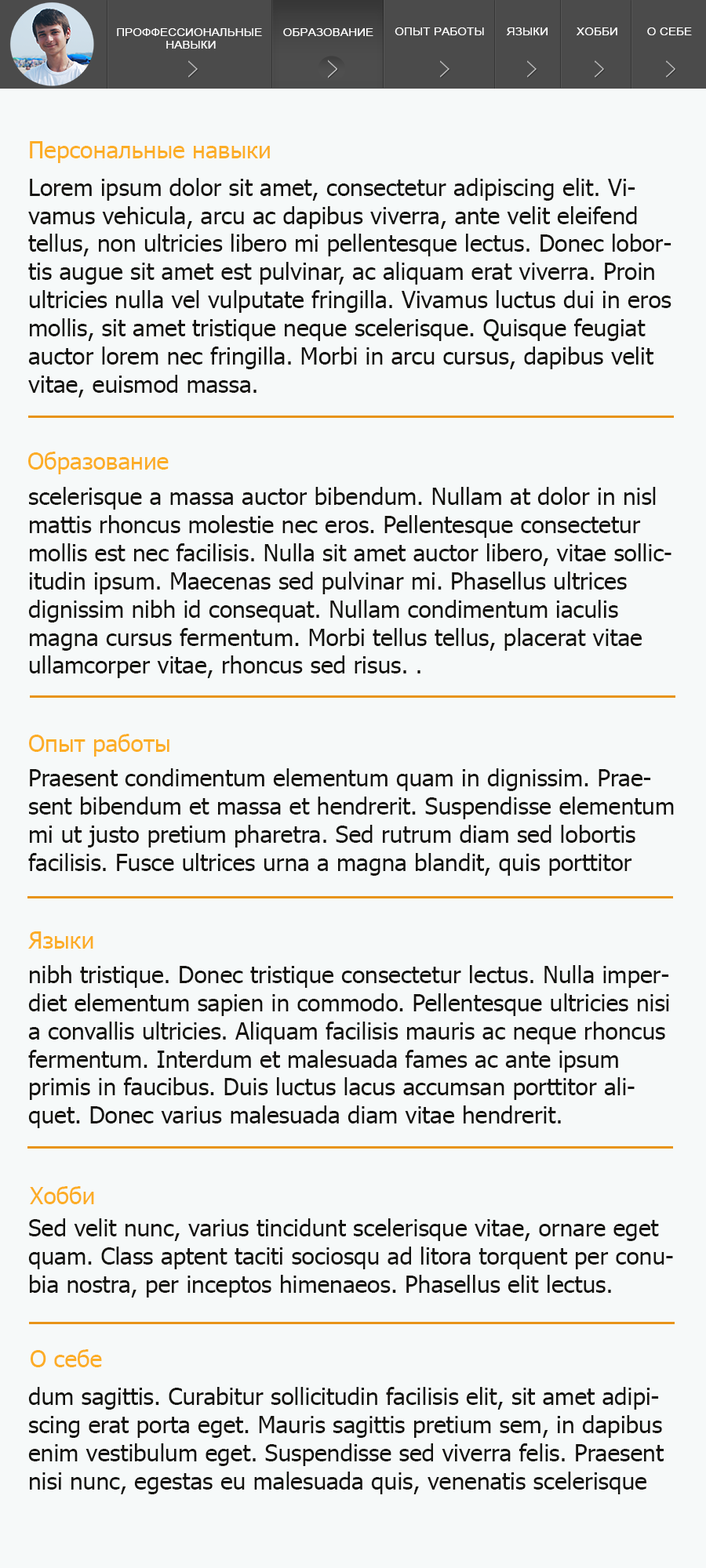
<style>
.page{position:relative;width:706px;height:1568px;background:#f6f9f9}
.page>*{position:absolute;margin:0}
.t1{font:10.6px "ArialMT";letter-spacing:0.032em;color:#ffffff;text-transform:uppercase;scale:1.07 1}
.t2{font:23.4px "Tahoma";color:#fcad26}
.t3{font:23.4px "Tahoma";color:#14130f}
</style>
<div class="page">
<p class="t1" style="left:117px;top:28px;width:145px;height:21px;text-align:center">Проффессиональные <br>навыки</p>
<p class="t1" style="left:283px;top:28px;width:90px;height:8px">образование</p>
<p class="t1" style="left:394px;top:27px;width:90px;height:8px">опыт работы</p>
<p class="t1" style="left:506px;top:27px;width:41px;height:8px">языки</p>
<p class="t1" style="left:576px;top:27px;width:41px;height:8px">хобби</p>
<p class="t1" style="left:647px;top:27px;width:44px;height:8px">о себе</p>
<p class="t2" style="left:30px;top:141px;width:240px;height:22px">Персональные навыки</p>
<p class="t3" style="left:28px;top:178px;width:645px;height:1316px">Lorem ipsum dolor sit amet, consectetur adipiscing elit. Vivamus vehicula, arcu ac dapibus viverra, ante velit eleifend tellus, non ultricies libero mi pellentesque lectus. Donec lobortis augue sit amet est pulvinar, ac aliquam erat viverra. Proin ultricies nulla vel vulputate fringilla. Vivamus luctus dui in eros <br>mollis, sit amet tristique neque scelerisque. Quisque feugiat auctor lorem nec fringilla. Morbi in arcu cursus, dapibus velit vitae, euismod massa. <br><br><br><br>scelerisque a massa auctor bibendum. Nullam at dolor in nisl mattis rhoncus molestie nec eros. Pellentesque consectetur mollis est nec facilisis. Nulla sit amet auctor libero, vitae sollicitudin ipsum. Maecenas sed pulvinar mi. Phasellus ultrices dignissim nibh id consequat. Nullam condimentum iaculis magna cursus fermentum. Morbi tellus tellus, placerat vitae ullamcorper vitae, rhoncus sed risus. .<br><br><br><br>Praesent condimentum elementum quam in dignissim. Praesent bibendum et massa et hendrerit. Suspendisse elementum mi ut justo pretium pharetra. Sed rutrum diam sed lobortis facilisis. Fusce ultrices urna a magna blandit, quis porttitor  <br><br><br><br>nibh tristique. Donec tristique consectetur lectus. Nulla imperdiet elementum sapien in commodo. Pellentesque ultricies nisi a convallis ultricies. Aliquam facilisis mauris ac neque rhoncus fermentum. Interdum et malesuada fames ac ante ipsum primis in faucibus. Duis luctus lacus accumsan porttitor aliquet. Donec varius malesuada diam vitae hendrerit.<br><br><br><br>Sed velit nunc, varius tincidunt scelerisque vitae, ornare eget quam. Class aptent taciti sociosqu ad litora torquent per conubia nostra, per inceptos himenaeos. Phasellus elit lectus. <br><br><br><br>dum sagittis. Curabitur sollicitudin facilisis elit, sit amet adipiscing erat porta eget. Mauris sagittis pretium sem, in dapibus enim vestibulum eget. Suspendisse sed viverra felis. Praesent nisi nunc, egestas eu malesuada quis, venenatis scelerisque tellus. Nam vel tellus eu tortor imperdiet hendrerit id id sapien. Sed quis turpis erat. Fusce aliquam, augue et mattis lacinia, tortor sem commodo felis, sit amet auctor sapien nisl non velit.</p>
<p class="t2" style="left:28px;top:452px;width:141px;height:22px">Образование</p>
<p class="t2" style="left:29px;top:734px;width:140px;height:23px">Опыт работы</p>
<p class="t2" style="left:28px;top:931px;width:65px;height:18px">Языки</p>
<p class="t2" style="left:30px;top:1186px;width:64px;height:18px">Хобби</p>
<p class="t2" style="left:31px;top:1349px;width:71px;height:18px">О себе</p>
</div>
